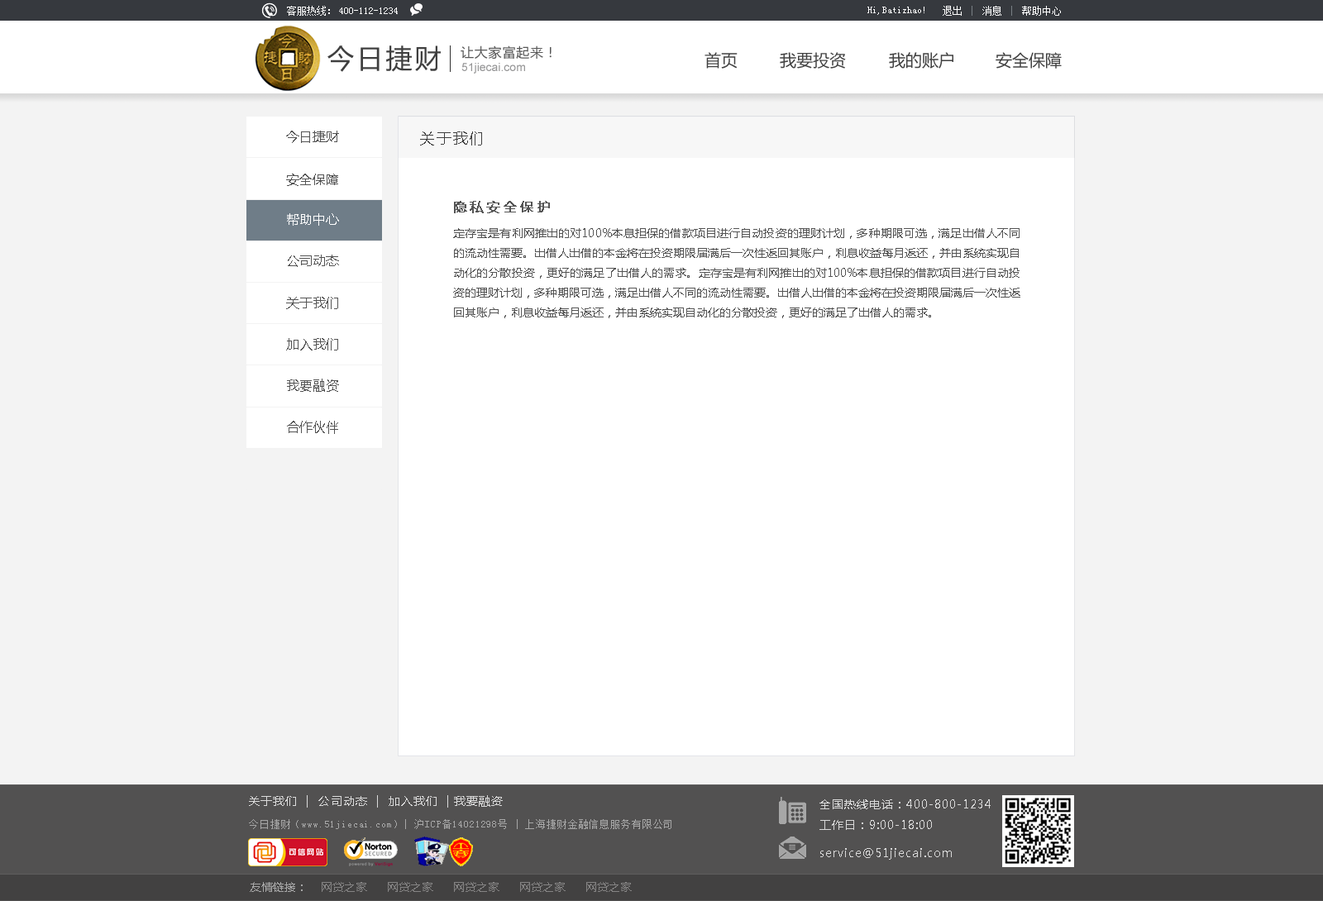
<style>
.page{position:relative;width:1323px;height:901px;background:#ffffff}
.page>*{position:absolute;margin:0}
.t1{font:9.9px "SimSun";color:#ffffff}
.t2{font:26.5px "MicrosoftYaHei";letter-spacing:0.1em;color:#3f3f3f}
.t3{font:13.2px "MicrosoftYaHei";letter-spacing:0.05em;color:#575757}
.t4{font:16.5px "MicrosoftYaHei";color:#414141}
.t5{font:11.6px "ArialMT";color:#969697}
.t6{font:13.2px "MicrosoftYaHei";color:#535353}
.t7{font:14.9px "MicrosoftYaHei";letter-spacing:0.1em;color:#3f3f3f}
.t8{font:13.2px "MicrosoftYaHei";letter-spacing:0.2em;color:#545454;font-weight:bold}
.t9{font:13.2px "MicrosoftYaHei";color:#ffffff}
.t10{font:11.6px/19.8px "MicrosoftYaHei";color:#545454}
.t11{font:13.2px "MicrosoftYaHei";color:#545454}
.t12{font:11.6px "MicrosoftYaHei";letter-spacing:0.07em;color:#dbdbdb}
.t13{font:11.6px "MicrosoftYaHei";letter-spacing:0.07em;color:#dadada}
.t14{font:9.9px "SimSun";letter-spacing:0.07em;color:#a7a7a7}
.t15{font:11.6px "MicrosoftYaHei";color:#858484}
.t16{font:11.6px "MicrosoftYaHei";color:#a7a7a7}
</style>
<div class="page">
<p class="t1" style="left:287px;top:6px;width:43px;height:10px">客服热线：</p>
<p class="t1" style="left:943px;top:6px;width:118px;height:10px">退出    消息    帮助中心</p>
<p class="t1" style="left:339px;top:7px;width:59px;height:7px">400-112-1234</p>
<p class="t1" style="left:867px;top:7px;width:57px;height:8px">Hi,Batizhao!</p>
<p class="t2" style="left:327px;top:45px;width:114px;height:27px">今日捷财</p>
<p class="t3" style="left:461px;top:45px;width:91px;height:14px">让大家富起来！</p>
<p class="t4" style="left:705px;top:52px;width:33px;height:17px">首页</p>
<p class="t4" style="left:780px;top:52px;width:66px;height:17px">我要投资</p>
<p class="t4" style="left:889px;top:52px;width:64px;height:17px">我的账户</p>
<p class="t4" style="left:996px;top:52px;width:66px;height:17px">安全保障</p>
<p class="t5" style="left:461px;top:63px;width:64px;height:11px">51jiecai.com</p>
<p class="t6" style="left:286px;top:131px;width:53px;height:12px">今日捷财</p>
<p class="t7" style="left:420px;top:131px;width:62px;height:15px">关于我们</p>
<p class="t6" style="left:286px;top:174px;width:52px;height:12px">安全保障</p>
<p class="t8" style="left:454px;top:201px;width:96px;height:12px">隐私安全保护</p>
<p class="t9" style="left:287px;top:213px;width:52px;height:13px">帮助中心</p>
<p class="t10" style="left:453px;top:228px;width:567px;height:90px;text-align:justify">定存宝是有利网推出的对100%本息担保的借款项目进行自动投资的理财计划，多种期限可选，满足出借人不同的流动性需要。出借人出借的本金将在投资期限届满后一次性返回其账户，利息收益每月返还，并由系统实现自动化的分散投资，更好的满足了出借人的需求。定存宝是有利网推出的对100%本息担保的借款项目进行自动投资的理财计划，多种期限可选，满足出借人不同的流动性需要。出借人出借的本金将在投资期限届满后一次性返回其账户，利息收益每月返还，并由系统实现自动化的分散投资，更好的满足了出借人的需求。</p>
<p class="t6" style="left:288px;top:255px;width:51px;height:12px">公司动态</p>
<p class="t11" style="left:286px;top:297px;width:52px;height:12px">关于我们</p>
<p class="t6" style="left:286px;top:338px;width:52px;height:13px">加入我们</p>
<p class="t6" style="left:287px;top:379px;width:52px;height:13px">我要融资</p>
<p class="t6" style="left:287px;top:421px;width:51px;height:13px">合作伙伴</p>
<p class="t12" style="left:249px;top:795px;width:254px;height:13px">关于我们  |  公司动态  |  加入我们  | 我要融资</p>
<p class="t13" style="left:819px;top:800px;width:172px;height:30px">全国热线电话：400-800-1234<br>工作日：9:00-18:00</p>
<p class="t14" style="left:249px;top:819px;width:422px;height:10px">今日捷财（www.51jiecai.com）| 沪ICP备14021298号 | 上海捷财金融信息服务有限公司</p>
<p class="t13" style="left:820px;top:848px;width:132px;height:12px">service@51jiecai.com</p>
<p class="t15" style="left:250px;top:882px;width:382px;height:10px"><span class="t16">友情链接：</span>    网贷之家      网贷之家      网贷之家      网贷之家      网贷之家</p>
</div>
